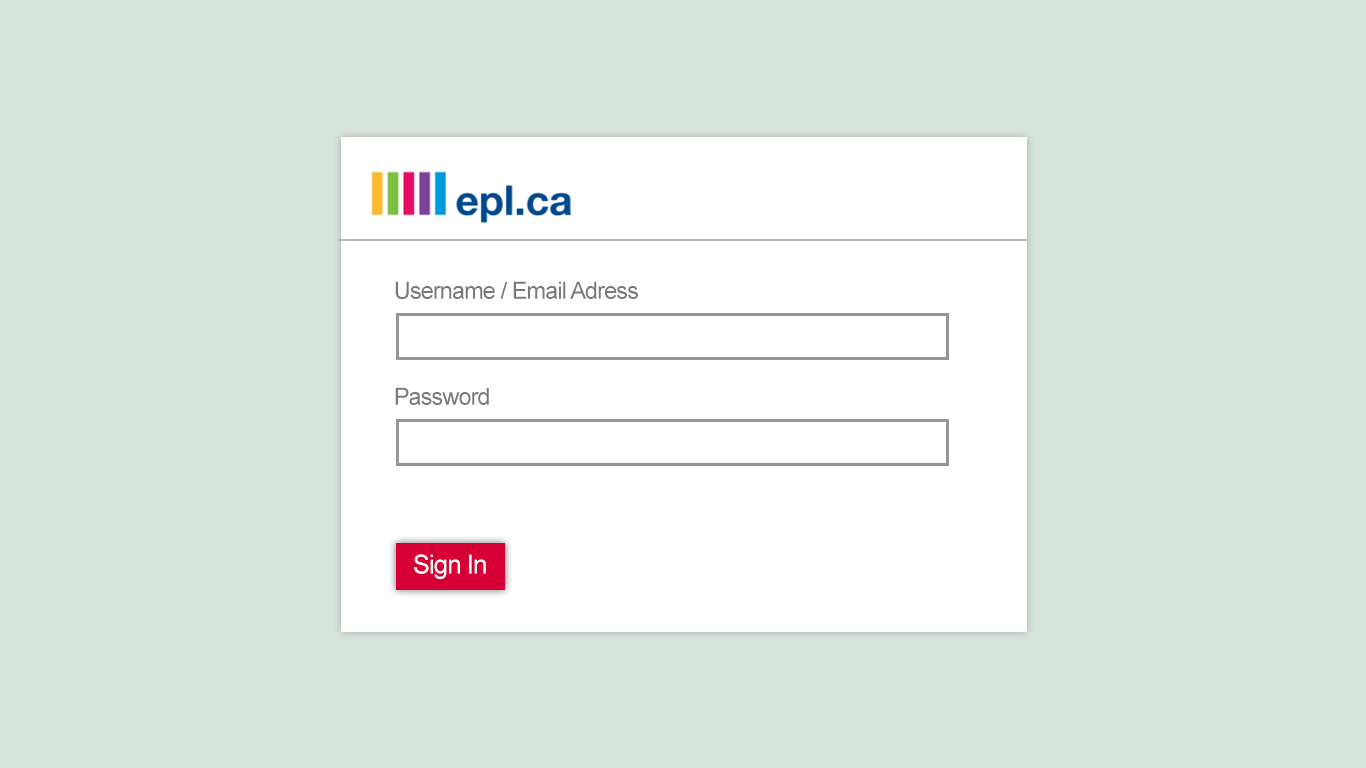
<style>
.page{position:relative;width:1366px;height:768px;background:#d6e4dc}
.page>*{position:absolute;margin:0}
.t1{font:23.6px "ArialMT";letter-spacing:-0.04em;color:#767979}
.t2{font:26px "ArialMT";letter-spacing:-0.04em;color:#ffffff}
</style>
<div class="page">
<p class="t1" style="left:395px;top:281px;width:243px;height:18px">Username / Email Adress</p>
<p class="t1" style="left:395px;top:387px;width:94px;height:18px">Password</p>
<p class="t2" style="left:414px;top:554px;width:72px;height:25px">Sign In</p>
</div>
